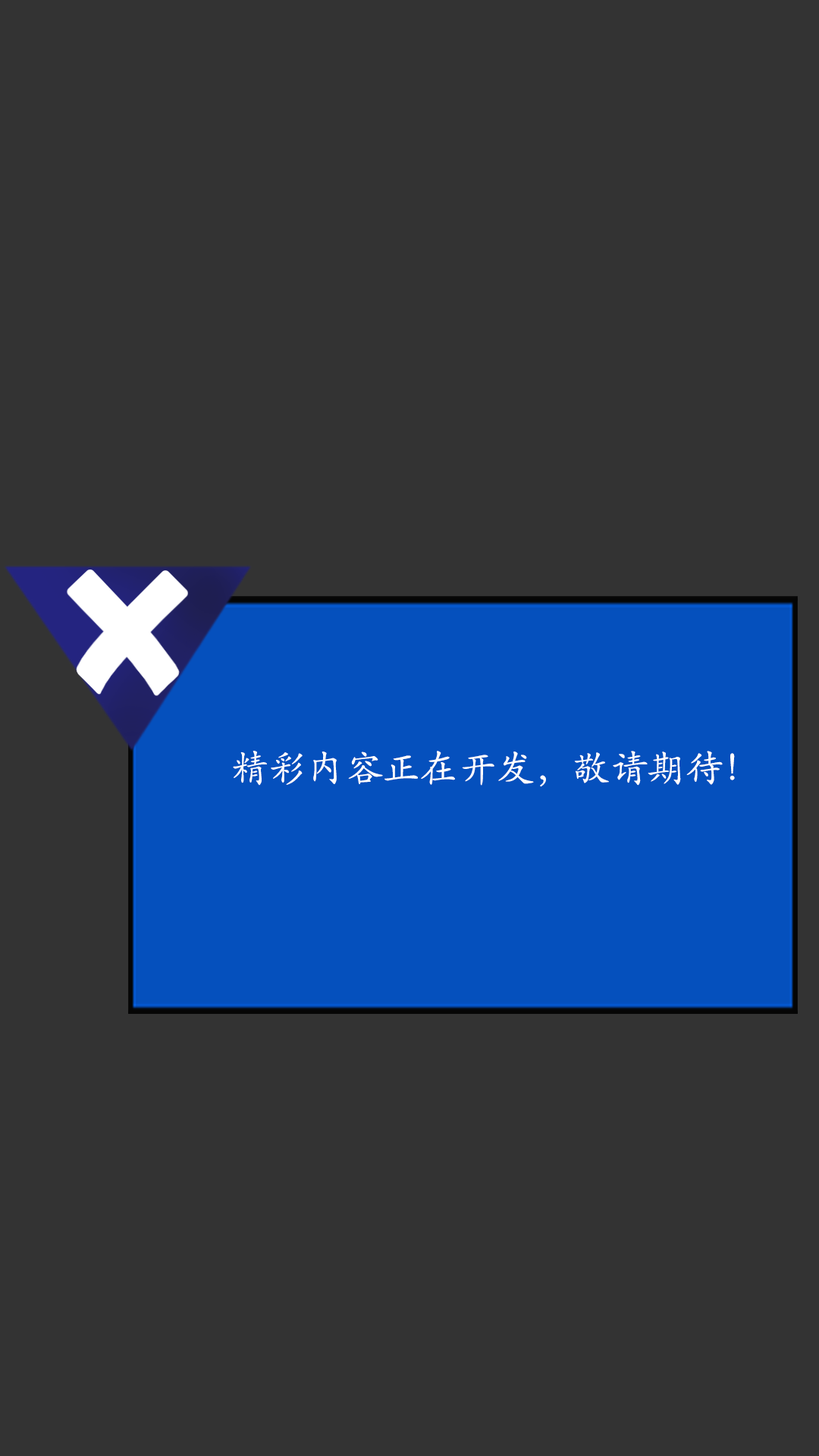
<style>
.page{position:relative;width:819px;height:1456px;background:#333333}
.page>*{position:absolute;margin:0}
.t1{font:37.9px "STKaiti";color:#ffffff}
</style>
<div class="page">
<p class="t1" style="left:233px;top:751px;width:502px;height:36px">精彩内容正在开发，敬请期待！</p>
</div>
